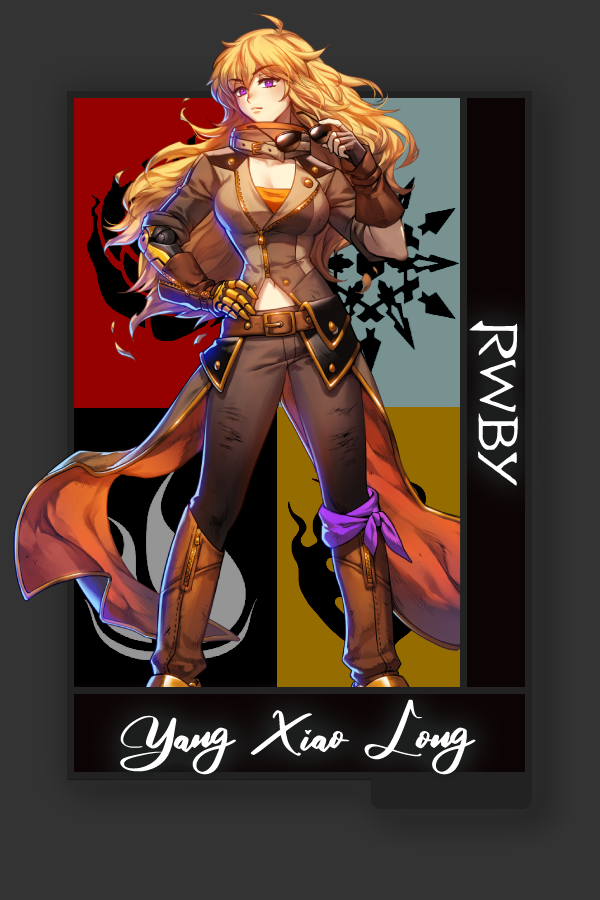
<style>
.page{position:relative;width:600px;height:900px;background:#333333}
.page>*{position:absolute;margin:0}
.t1{font:61.3px "RWBY_Style";color:#ffffff;scale:1.25 1}
.t2{font:76.6px "RosegaFREE";color:#ffffff;scale:0.91 1}
</style>
<div class="page">
<p class="t1" style="left:469px;top:320px;width:49px;height:166px;rotate:90deg">RWBY</p>
<p class="t2" style="left:120px;top:699px;width:356px;height:81px">Yang Xiao Long</p>
</div>
